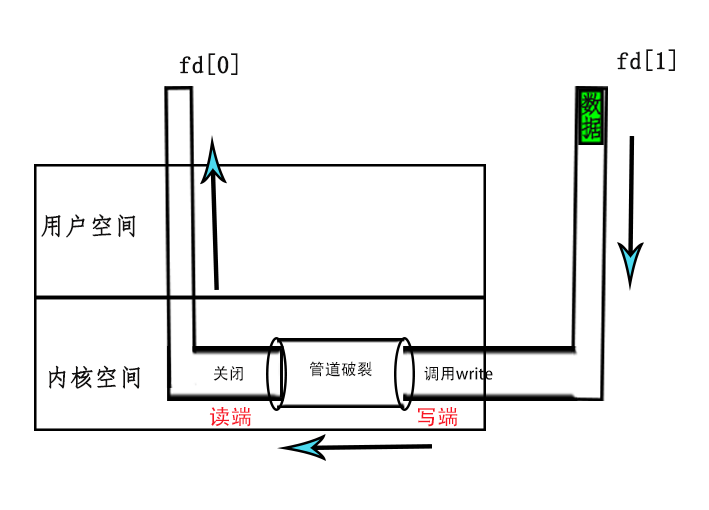
<style>
.page{position:relative;width:709px;height:510px;background:#ffffff}
.page>*{position:absolute;margin:0}
.t1{font:24.1px "FangSong";color:#111010;font-weight:bold}
.t2{font:16px "AdobeHeitiStd-Regular";color:#0a0909}
.t3{font:21.5px "AdobeHeitiStd-Regular";color:#f81525}
</style>
<div class="page">
<p class="t1" style="left:179px;top:53px;width:59px;height:22px">fd[0]</p>
<p class="t1" style="left:617px;top:49px;width:58px;height:22px">fd[1]</p>
<p class="t1" style="left:41px;top:214px;width:95px;height:24px">用户空间</p>
<p class="t1" style="left:49px;top:365px;width:91px;height:24px">内核空间</p>
<p class="t2" style="left:213px;top:366px;width:30px;height:15px">关闭</p>
<p class="t2" style="left:310px;top:361px;width:62px;height:16px">管道破裂</p>
<p class="t2" style="left:424px;top:366px;width:69px;height:15px">调用write</p>
<p class="t3" style="left:209px;top:407px;width:42px;height:20px">读端</p>
<p class="t3" style="left:418px;top:407px;width:40px;height:20px">写端</p>
</div>
